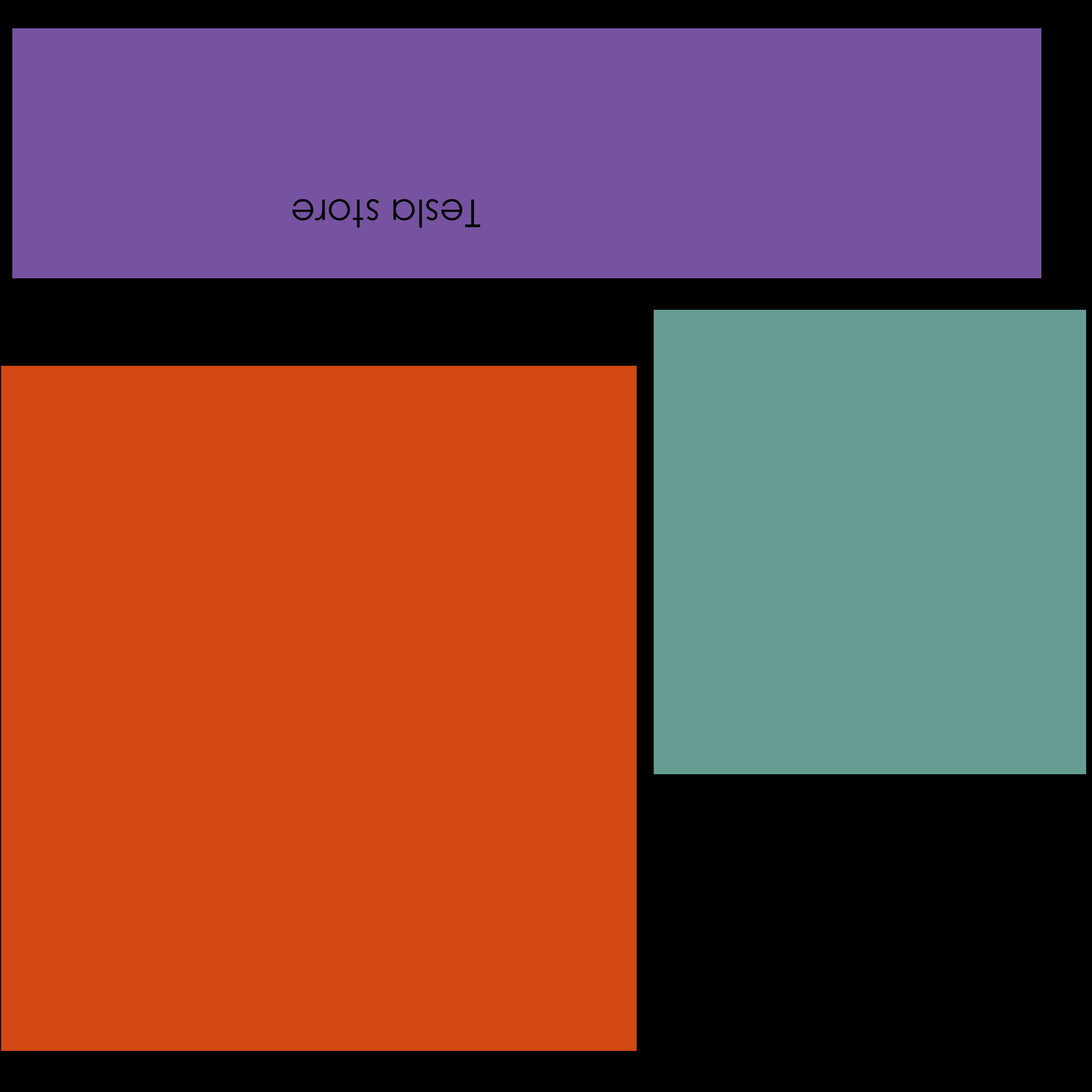
<style>
.page{position:relative;width:1092px;height:1092px;background:#d14812}
.page>*{position:absolute;margin:0}
.t1{font:38.4px "CenturyGothic";color:#000000}
</style>
<div class="page">
<p class="t1" style="left:292px;top:199px;width:188px;height:29px;rotate:180deg">Tesla store</p>
</div>
